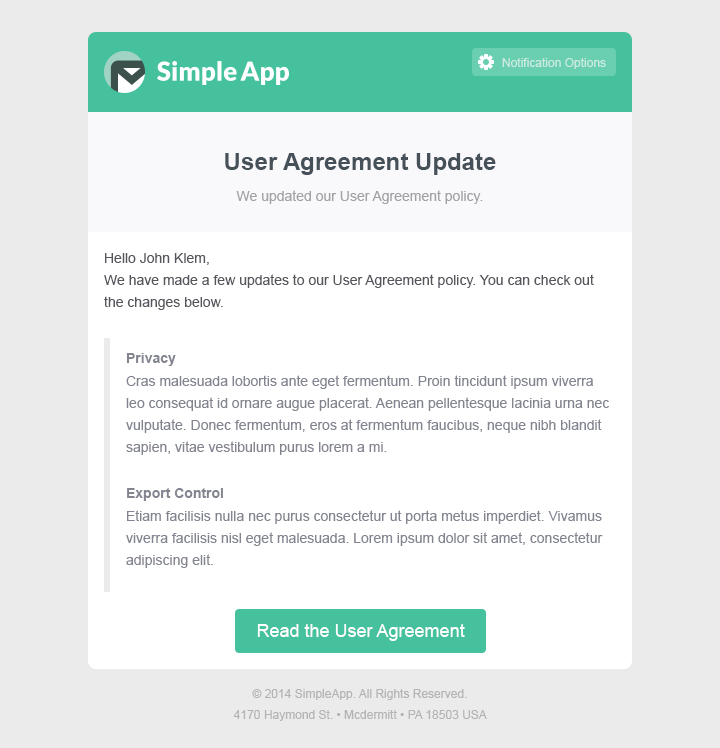
<style>
.page{position:relative;width:720px;height:748px;background:#ffffff}
.page>*{position:absolute;margin:0}
.t1{font:12px "ArialMT";color:#ccece2}
.t2{font:24px "Arial-BoldMT";color:#465059}
.t3{font:14px "ArialMT";color:#a1a2a5}
.t4{font:14px/22px "ArialMT";color:#54565c}
.t5{font:14px/22px "ArialMT";color:#82858f}
.t6{font:14px/22px "Arial-BoldMT";color:#82858f}
.t7{font:18px "ArialMT";color:#ffffff}
.t8{font:12px/21px "ArialMT";color:#b3b3b3}
</style>
<div class="page">
<p class="t1" style="left:502px;top:58px;width:104px;height:11px">Notification Options</p>
<p class="t2" style="left:225px;top:153px;width:271px;height:22px">User Agreement Update</p>
<p class="t3" style="left:236px;top:190px;width:247px;height:14px">We updated our User Agreement policy.</p>
<p class="t4" style="left:104px;top:253px;width:490px;height:57px">Hello John Klem,<br>We have made a few updates to our User Agreement policy. You can check out the changes below.</p>
<p class="t5" style="left:126px;top:353px;width:483px;height:215px"><span class="t6">Privacy<br></span>Cras malesuada lobortis ante eget fermentum. Proin tincidunt ipsum viverra leo consequat id ornare augue placerat. Aenean pellentesque lacinia urna nec vulputate. Donec fermentum, eros at fermentum faucibus, neque nibh blandit sapien, vitae vestibulum purus lorem a mi.<br><br><span class="t6">Export Control<br></span>Etiam facilisis nulla nec purus consectetur ut porta metus imperdiet. Vivamus viverra facilisis nisl eget malesuada. Lorem ipsum dolor sit amet, consectetur adipiscing elit.</p>
<p class="t7" style="left:257px;top:624px;width:208px;height:17px">Read the User Agreement</p>
<p class="t8" style="left:233px;top:689px;width:254px;height:32px;text-align:center">© 2014 SimpleApp. All Rights Reserved.<br>4170 Haymond St. • Mcdermitt • PA 18503 USA</p>
</div>
